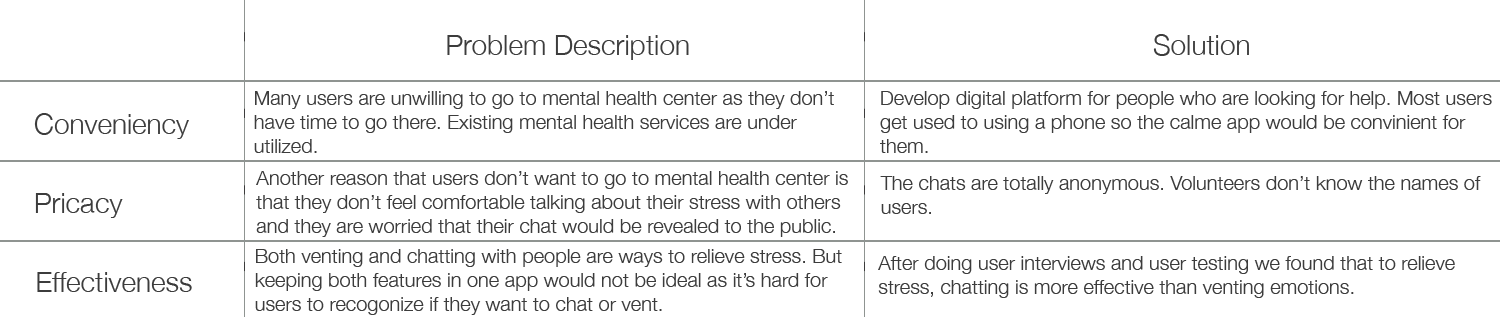
<style>
.page{position:relative;width:1500px;height:317px;background:#ffffff}
.page>*{position:absolute;margin:0}
.t1{font:28px "HelveticaNeue-Light";color:#3c3c3c}
.t2{font:20px "HelveticaNeue-Light";color:#3c3c3c}
</style>
<div class="page">
<p class="t1" style="left:447px;top:34px;width:802px;height:26px">Problem Description                Solution</p>
<p class="t2" style="left:254px;top:91px;width:580px;height:62px">Many users are unwilling to go to mental health center as they don’t <br>have time to go there. Existing mental health services are under <br>utilized.</p>
<p class="t2" style="left:880px;top:91px;width:612px;height:62px">Develop digital platform for people who are looking for help. Most users<br>get used to using a phone so the calme app would be convinient for<br>them.</p>
<p class="t1" style="left:34px;top:113px;width:155px;height:26px">Conveniency</p>
<p class="t2" style="left:256px;top:171px;width:592px;height:66px">Another reason that users don’t want to go to mental health center is<br>that they don’t feel comfortable talking about their stress with others<br>and they are worried that their chat would be revealed to the public.</p>
<p class="t2" style="left:880px;top:176px;width:601px;height:38px">The chats are totally anonymous. Volunteers don’t know the names of<br>users.</p>
<p class="t1" style="left:35px;top:193px;width:88px;height:25px">Pricacy</p>
<p class="t2" style="left:255px;top:249px;width:587px;height:66px">Both venting and chatting with people are ways to relieve stress. But<br>keeping both features in one app would not be ideal as it’s hard for <br>users to recogonize if they want to chat or vent.</p>
<p class="t2" style="left:878px;top:256px;width:577px;height:42px">After doing user interviews and user testing we found that to relieve<br>stress, chatting is more effective than venting emotions.</p>
<p class="t1" style="left:37px;top:272px;width:155px;height:20px">Effectiveness</p>
</div>
